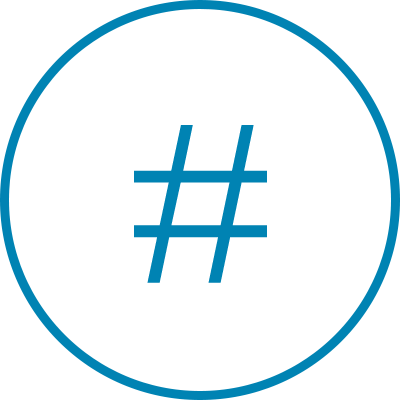
<style>
.page{position:relative;width:400px;height:400px;background:#ffffff}
.page>*{position:absolute;margin:0}
.t1{font:227.5px "AbadiMT-CondensedLight";color:#0084b4}
</style>
<div class="page">
<p class="t1" style="left:134px;top:125px;width:133px;height:158px">#</p>
</div>
